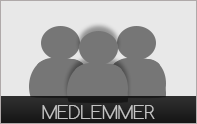
<style>
.page{position:relative;width:197px;height:124px;background:#e8e8e8}
.page>*{position:absolute;margin:0}
.t1{font:18px "Comfortaa-Light";color:#c3c3c3}
</style>
<div class="page">
<p class="t1" style="left:42px;top:105px;width:113px;height:14px">MEDLEMMER</p>
</div>
